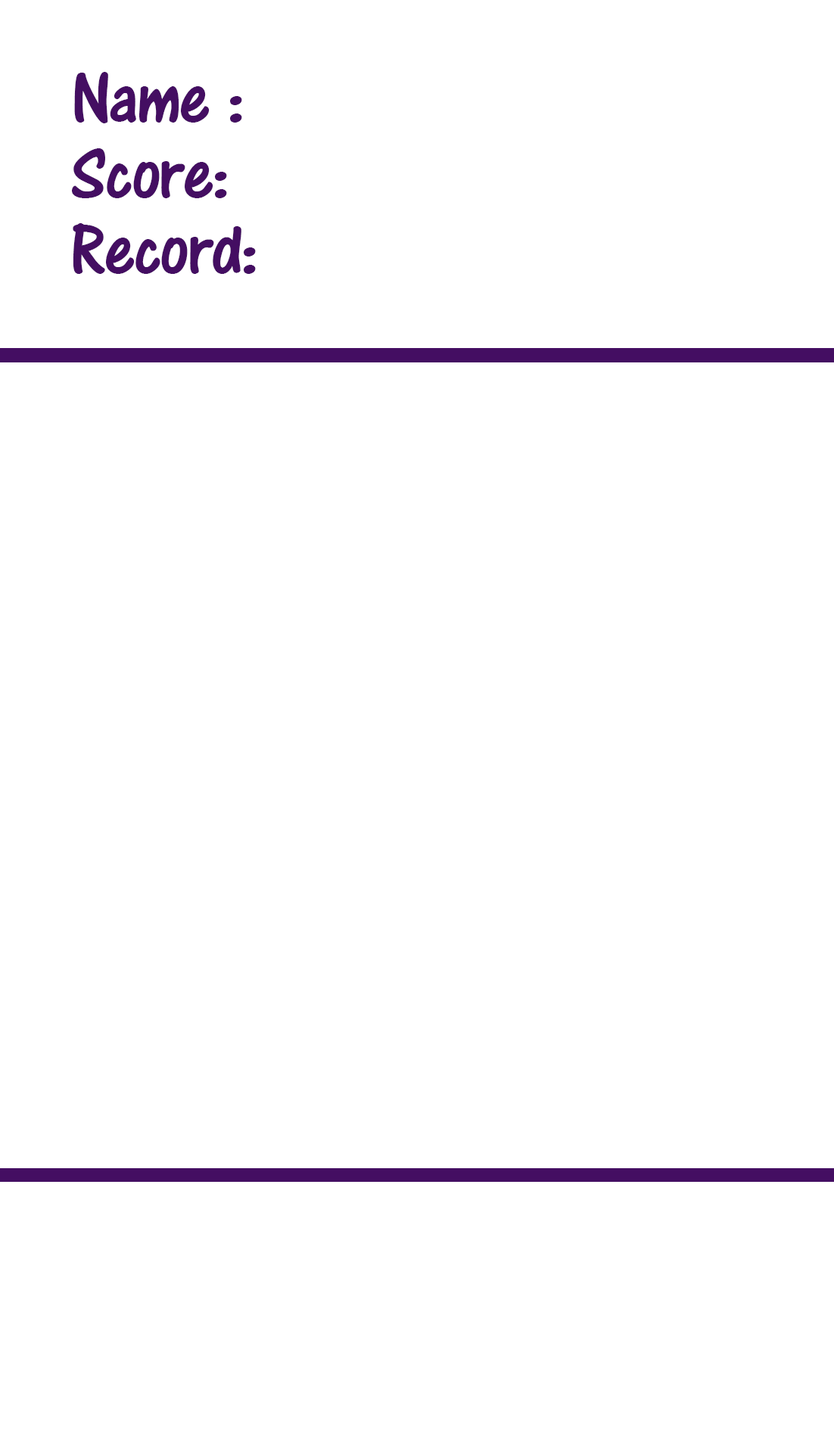
<style>
.page{position:relative;width:834px;height:1430px;background:#ffffff}
.page>*{position:absolute;margin:0}
.t1{font:75.7px/75.7px "ARCENA";letter-spacing:-0.025em;color:#440e62}
</style>
<div class="page">
<p class="t1" style="left:72px;top:72px;width:184px;height:202px">Name :<br>Score:<br>Record:</p>
</div>
